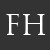
<style>
.page{position:relative;width:50px;height:50px;background:#333333}
.page>*{position:absolute;margin:0}
.t1{font:28px "TrajanPro-Regular";color:#ffffff}
</style>
<div class="page">
<p class="t1" style="left:6px;top:14px;width:40px;height:21px">FH</p>
</div>
